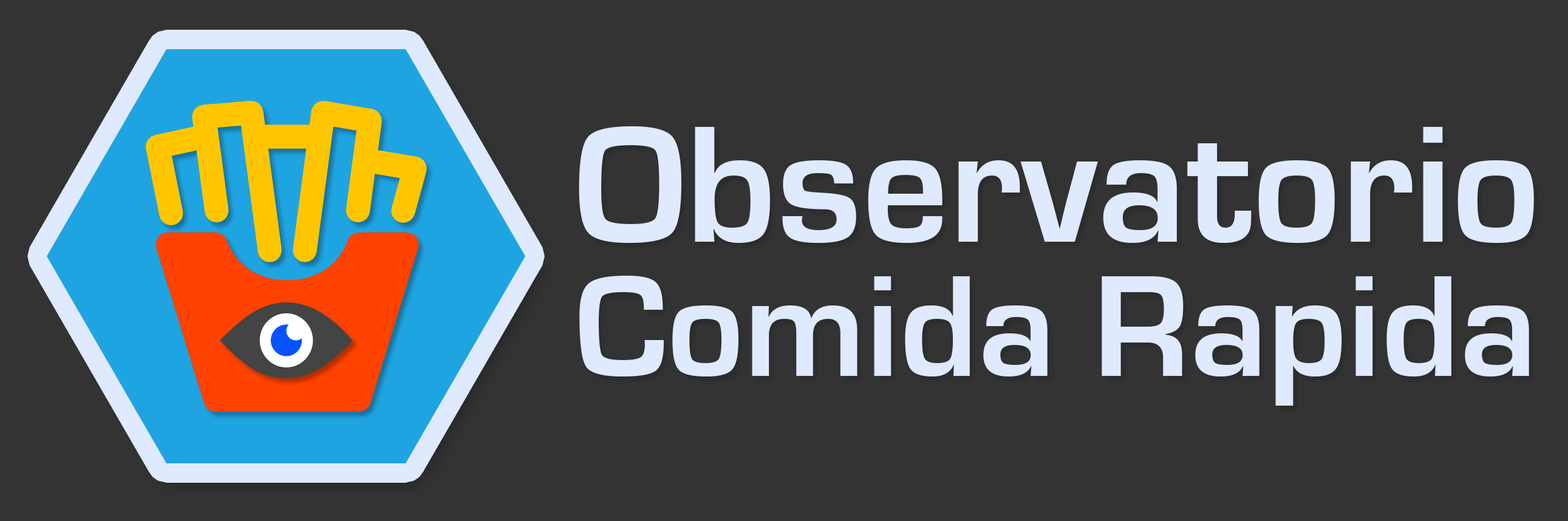
<style>
.page{position:relative;width:1568px;height:521px;background:#333333}
.page>*{position:absolute;margin:0}
.t1{font:149.5px/134.5px "EurostileBold";color:#dfeaff}
.t2{font:171.9px/134.5px "EurostileBold";color:#dfeaff}
</style>
<div class="page">
<p class="t1" style="left:579px;top:126px;width:955px;height:280px"><span class="t2">Observatorio<br></span>Comida Rapida</p>
</div>
